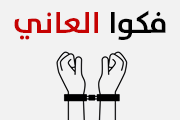
<style>
.page{position:relative;width:180px;height:120px;background:#f2f2f2}
.page>*{position:absolute;margin:0}
.t1{font:30px "TheSans-Bold";color:#c60202}
.t2{font:30px "TheSans-Bold";color:#000000}
</style>
<div class="page">
<p class="t1" style="left:14px;top:10px;width:152px;height:30px"><span class="t2">فكوا </span>العاني</p>
</div>
